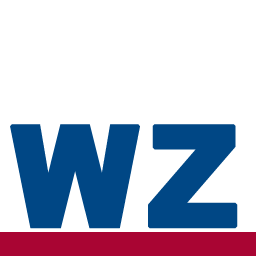
<style>
.page{position:relative;width:256px;height:256px;background:#ffffff}
.page>*{position:absolute;margin:0}
.t1{font:140px "Arial-Black";letter-spacing:0.05em;color:#004785;font-weight:bold;scale:0.9 1}
</style>
<div class="page">
<p class="t1" style="left:10px;top:124px;width:228px;height:105px">WZ</p>
</div>
